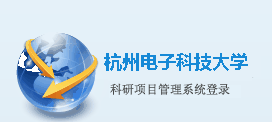
<style>
.page{position:relative;width:272px;height:122px;background:#e4f1f9}
.page>*{position:absolute;margin:0}
.t1{font:18px "MicrosoftYaHei-Bold";color:#1689d6}
.t2{font:12px "NSimSun";color:#474848}
</style>
<div class="page">
<p class="t1" style="left:104px;top:53px;width:144px;height:18px">杭州电子科技大学</p>
<p class="t2" style="left:110px;top:83px;width:120px;height:12px">科研项目管理系统登录</p>
</div>
